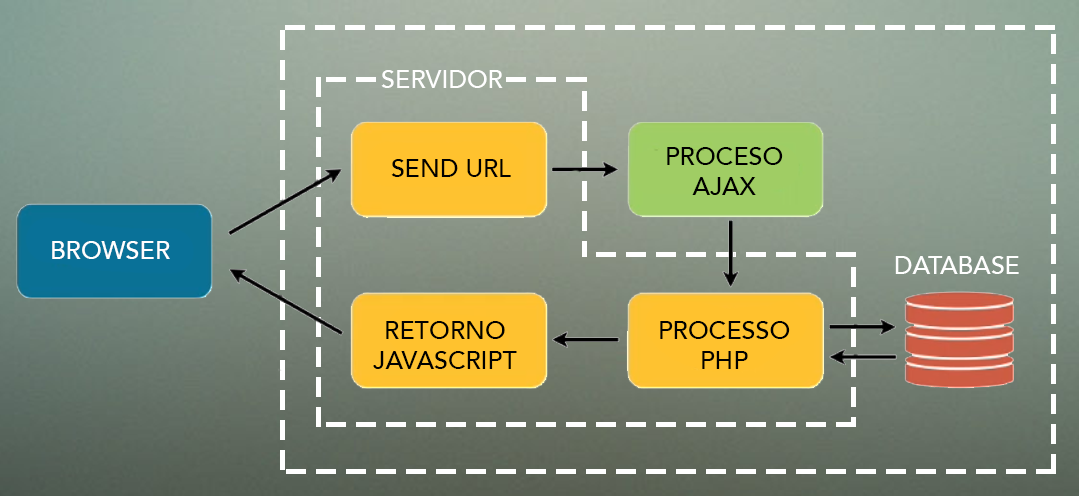
<style>
.page{position:relative;width:1079px;height:496px}
.page>*{position:absolute;margin:0}
.t1{font:25px "AvenirLT-Medium";color:#ffffff;text-transform:uppercase}
.t2{font:25px/30px "AvenirLT-Medium";color:#000000;text-transform:uppercase}
.t3{font:25px "AvenirLT-Medium";color:#000000;text-transform:uppercase}
</style>
<div class="page">
<p class="t1" style="left:381px;top:70px;width:122px;height:18px">servidor</p>
<p class="t2" style="left:667px;top:147px;width:116px;height:48px;text-align:center">proceso<br>ajax</p>
<p class="t3" style="left:391px;top:159px;width:120px;height:18px">send url</p>
<p class="t1" style="left:52px;top:241px;width:118px;height:18px">Browser</p>
<p class="t1" style="left:895px;top:256px;width:124px;height:18px">Database</p>
<p class="t2" style="left:373px;top:321px;width:144px;height:48px;text-align:center">retorno<br>javascript</p>
<p class="t2" style="left:660px;top:321px;width:130px;height:48px;text-align:center">Processo<br>php</p>
</div>
